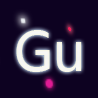
<style>
.page{position:relative;width:98px;height:98px;background:#0d0221}
.page>*{position:absolute;margin:0}
.t1{font:53.3px "MicrosoftYaHei";color:#ffffff}
</style>
<div class="page">
<p class="t1" style="left:16px;top:30px;width:66px;height:42px">Gu</p>
</div>
